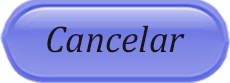
<style>
.page{position:relative;width:230px;height:83px}
.page>*{position:absolute;margin:0}
.t1{font:37.8px "Cambria-Italic";color:#171717}
</style>
<div class="page">
<p class="t1" style="left:47px;top:25px;width:138px;height:28px">Cancelar</p>
</div>
